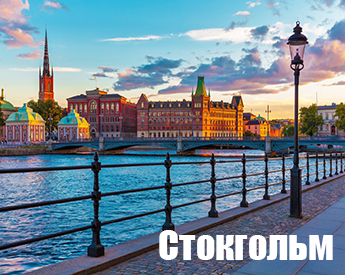
<style>
.page{position:relative;width:345px;height:275px}
.page>*{position:absolute;margin:0}
.t1{font:38px "Impact";color:#ffffff}
</style>
<div class="page">
<p class="t1" style="left:159px;top:230px;width:174px;height:30px">Стокгольм</p>
</div>
